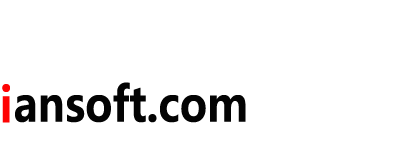
<style>
.page{position:relative;width:400px;height:150px;background:#ffffff}
.page>*{position:absolute;margin:0}
.t1{font:48px "MicrosoftYaHei-Bold";color:#fe0303;scale:0.87 1}
.t2{font:48px "MicrosoftYaHei-Bold";color:#030303;scale:0.87 1}
</style>
<div class="page">
<p class="t1" style="left:2px;top:84px;width:8px;height:39px">i</p>
<p class="t2" style="left:15px;top:82px;width:231px;height:41px">ansoft.com</p>
</div>
